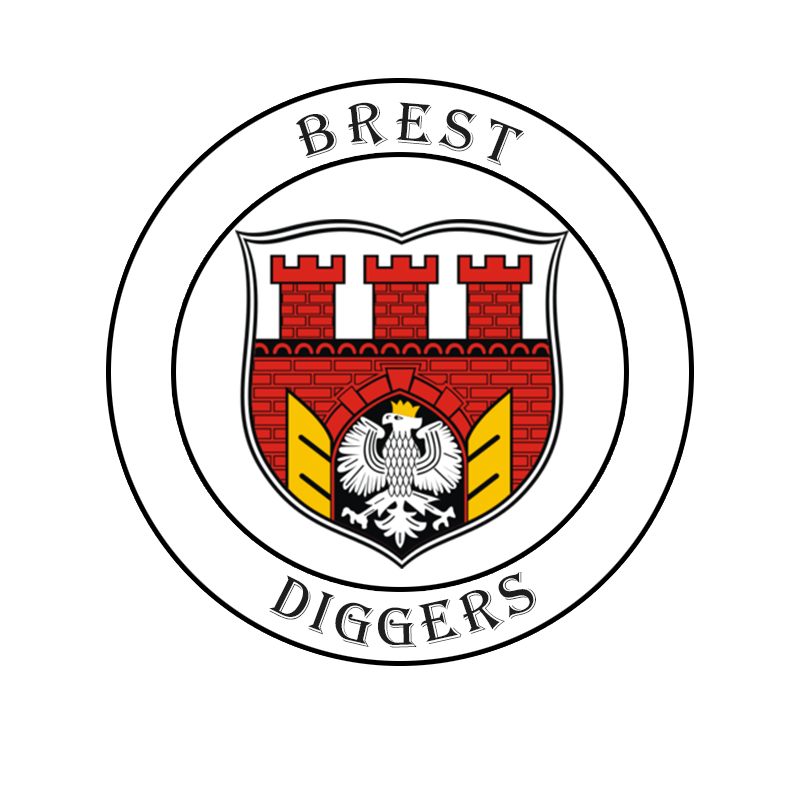
<style>
.page{position:relative;width:800px;height:788px;background:#ffffff}
.page>*{position:absolute;margin:0}
.t1{font:60px "Algerian";letter-spacing:0.12em;color:#1e1e1e}
</style>
<div class="page">
<p class="t1" style="left:295px;top:102px;width:230px;height:64px">brest</p>
<p class="t1" style="left:269px;top:572px;width:267px;height:76px">diGGERS</p>
</div>
